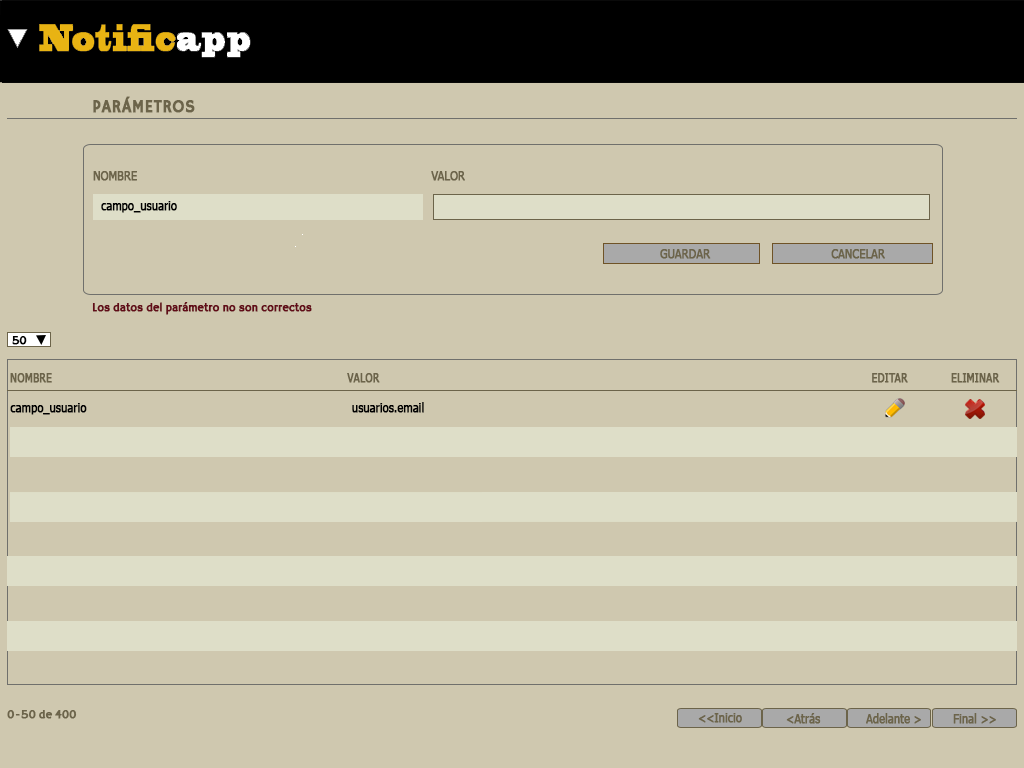
<style>
.page{position:relative;width:1024px;height:768px;background:#cfc8af}
.page>*{position:absolute;margin:0}
.t1{font:18px "HammersmithOne";color:#6c644a;font-weight:bold;scale:0.9 1}
.t2{font:12px "Tahoma";color:#6c644a;font-weight:bold;scale:0.9 1}
.t3{font:12px "Tahoma";color:#000000;font-weight:bold;scale:0.9 1}
.t4{font:12px "HammersmithOne";color:#620c18;font-weight:bold;scale:0.9 1}
.t5{font:12px "HammersmithOne";color:#000000;font-weight:bold;scale:0.9 1}
.t6{font:12px "Tahoma";color:#6c644a;font-weight:bold;scale:0.86 1}
.t7{font:12px "HammersmithOne";color:#6c644a;font-weight:bold;scale:0.9 1}
</style>
<div class="page">
<p class="t1" style="left:93px;top:96px;width:102px;height:17px">PARÁMETROS</p>
<p class="t2" style="left:93px;top:171px;width:44px;height:10px">NOMBRE</p>
<p class="t2" style="left:431px;top:171px;width:34px;height:10px">VALOR</p>
<p class="t3" style="left:101px;top:201px;width:76px;height:12px">campo_usuario</p>
<p class="t2" style="left:660px;top:249px;width:51px;height:10px">GUARDAR</p>
<p class="t2" style="left:831px;top:249px;width:54px;height:10px">CANCELAR</p>
<p class="t4" style="left:92px;top:302px;width:220px;height:13px">Los datos del parámetro no son correctos</p>
<p class="t5" style="left:12px;top:336px;width:15px;height:9px">50</p>
<p class="t6" style="left:10px;top:373px;width:42px;height:10px">NOMBRE</p>
<p class="t6" style="left:347px;top:373px;width:33px;height:10px">VALOR</p>
<p class="t6" style="left:872px;top:373px;width:36px;height:10px">EDITAR</p>
<p class="t6" style="left:951px;top:373px;width:49px;height:10px">ELIMINAR</p>
<p class="t3" style="left:10px;top:403px;width:77px;height:12px">campo_usuario</p>
<p class="t3" style="left:352px;top:402px;width:72px;height:11px">usuarios.email</p>
<p class="t7" style="left:7px;top:710px;width:70px;height:9px">0-50 de 400</p>
<p class="t2" style="left:698px;top:713px;width:44px;height:10px">&lt;&lt;Inicio</p>
<p class="t2" style="left:786px;top:713px;width:35px;height:11px">&lt;Atrás</p>
<p class="t2" style="left:866px;top:713px;width:55px;height:11px">Adelante &gt;</p>
<p class="t2" style="left:953px;top:713px;width:43px;height:11px">Final &gt;&gt;</p>
</div>
